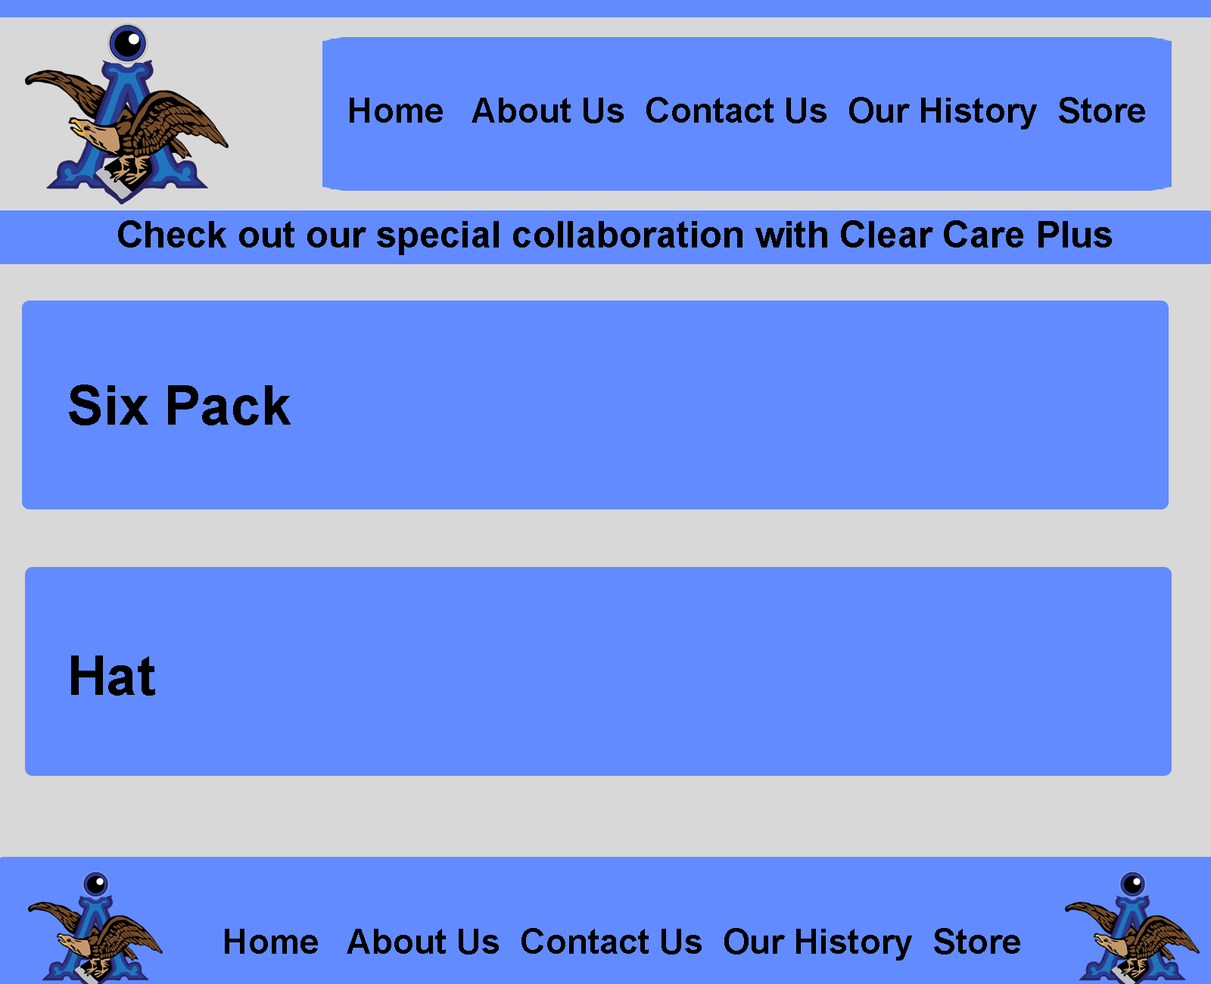
<style>
.page{position:relative;width:1211px;height:984px;background:#628bff}
.page>*{position:absolute;margin:0}
.t1{font:34.7px "Arial-BoldMT";color:#000000}
.t2{font:37.1px "Arial-BoldMT";color:#000000}
.t3{font:54.5px "Arial-BoldMT";color:#000000}
</style>
<div class="page">
<p class="t1" style="left:350px;top:97px;width:796px;height:32px">Home   About Us  Contact Us  Our History  Store</p>
<p class="t2" style="left:118px;top:220px;width:994px;height:35px">Check out our special collaboration with Clear Care Plus</p>
<p class="t3" style="left:69px;top:385px;width:222px;height:41px">Six Pack</p>
<p class="t3" style="left:71px;top:656px;width:84px;height:40px">Hat</p>
<p class="t1" style="left:225px;top:928px;width:796px;height:33px">Home   About Us  Contact Us  Our History  Store</p>
</div>
